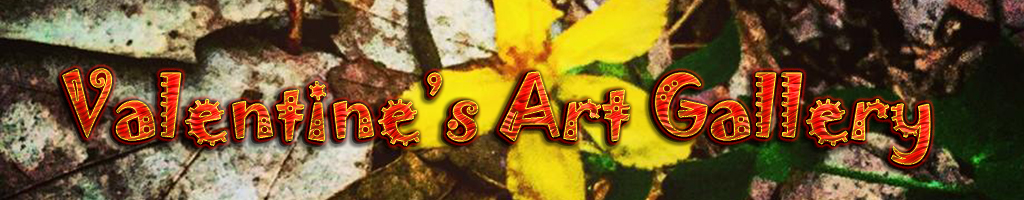
<style>
.page{position:relative;width:1024px;height:200px}
.page>*{position:absolute;margin:0}
.t1{font:76.7px "Jokerman-Regular"}
</style>
<div class="page">
<p class="t1" style="left:62px;top:69px;width:868px;height:95px">Valentine’s Art Gallery</p>
</div>
